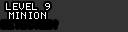
<style>
.page{position:relative;width:128px;height:32px;background:#333333}
.page>*{position:absolute;margin:0}
.t1{font:8px "Terminal";letter-spacing:0.05em;color:#ffffff}
</style>
<div class="page">
<p class="t1" style="left:6px;top:3px;width:44px;height:7px">LEVEL 9</p>
<p class="t1" style="left:9px;top:12px;width:37px;height:7px">MINION</p>
</div>
